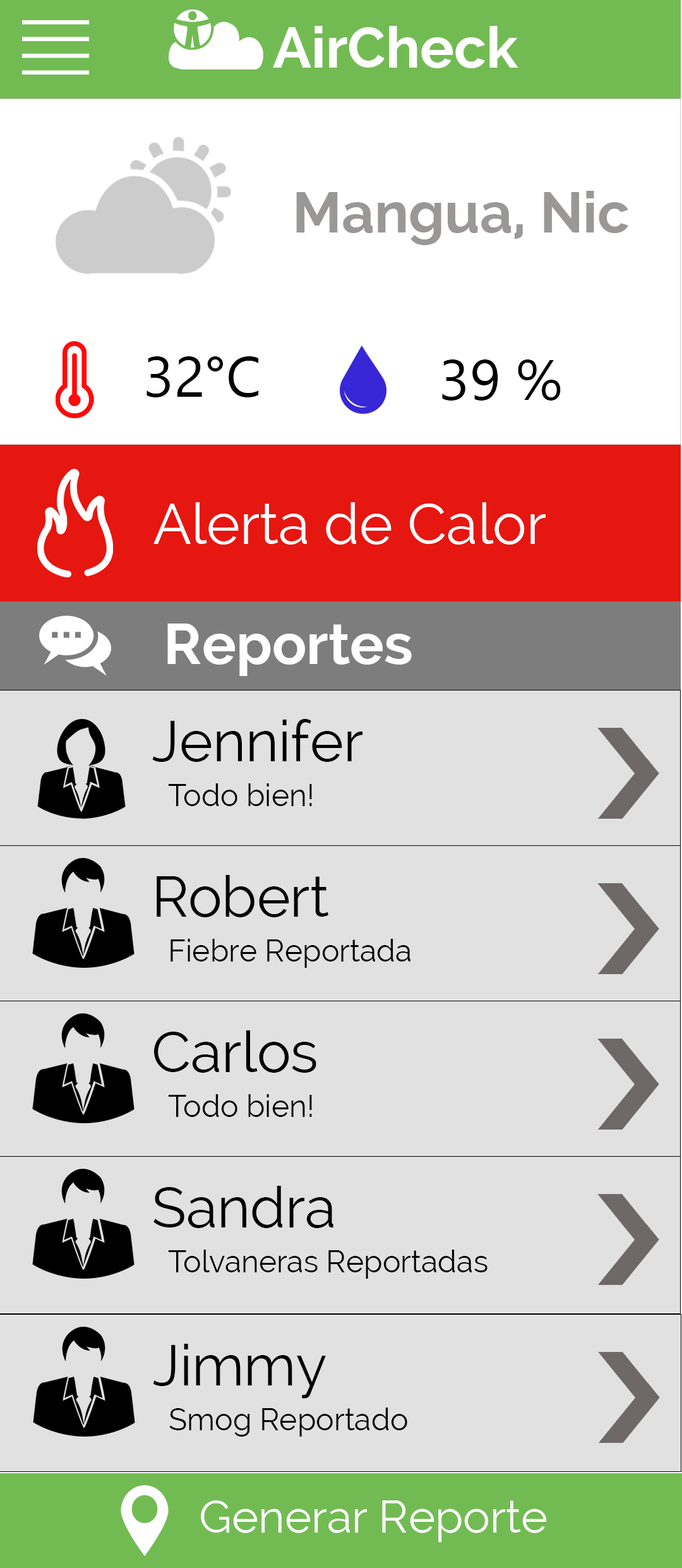
<style>
.page{position:relative;width:682px;height:1568px;background:#e1e1e1}
.page>*{position:absolute;margin:0}
.t1{font:56.9px "Raleway-Bold";color:#ffffff}
.t2{font:56.9px "Raleway-Bold";color:#9a9797}
.t3{font:56.9px "NirmalaUI";color:#000000}
.t4{font:56.9px "Raleway";color:#ffffff}
.t5{font:56.9px "Raleway";color:#000000}
.t6{font:30.3px "Raleway";color:#000000}
.t7{font:45.5px "Raleway";color:#ffffff}
</style>
<div class="page">
<p class="t1" style="left:273px;top:26px;width:246px;height:42px">AirCheck</p>
<p class="t2" style="left:296px;top:191px;width:333px;height:54px">Mangua, Nic</p>
<p class="t3" style="left:147px;top:356px;width:112px;height:41px">32°C</p>
<p class="t3" style="left:442px;top:359px;width:119px;height:42px">39 %</p>
<p class="t4" style="left:154px;top:502px;width:392px;height:43px">Alerta de Calor</p>
<p class="t1" style="left:167px;top:624px;width:245px;height:52px">Reportes</p>
<p class="t5" style="left:152px;top:719px;width:211px;height:43px">Jennifer</p>
<p class="t6" style="left:168px;top:783px;width:144px;height:23px">Todo bien!</p>
<p class="t5" style="left:157px;top:875px;width:172px;height:42px">Robert</p>
<p class="t6" style="left:171px;top:939px;width:240px;height:29px">Fiebre Reportada</p>
<p class="t5" style="left:154px;top:1030px;width:163px;height:43px">Carlos</p>
<p class="t6" style="left:168px;top:1094px;width:144px;height:23px">Todo bien!</p>
<p class="t5" style="left:154px;top:1186px;width:180px;height:42px">Sandra</p>
<p class="t6" style="left:168px;top:1250px;width:320px;height:29px">Tolvaneras Reportadas</p>
<p class="t5" style="left:153px;top:1344px;width:173px;height:55px">Jimmy</p>
<p class="t6" style="left:169px;top:1408px;width:238px;height:29px">Smog Reportado</p>
<p class="t7" style="left:201px;top:1500px;width:346px;height:42px">Generar Reporte</p>
</div>
